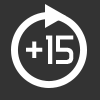
<style>
.page{position:relative;width:100px;height:100px;background:#333333}
.page>*{position:absolute;margin:0}
.t1{font:41.7px "AeroMaticsDisplayRegular";color:#ffffff}
</style>
<div class="page">
<p class="t1" style="left:26px;top:35px;width:48px;height:29px">+15</p>
</div>
